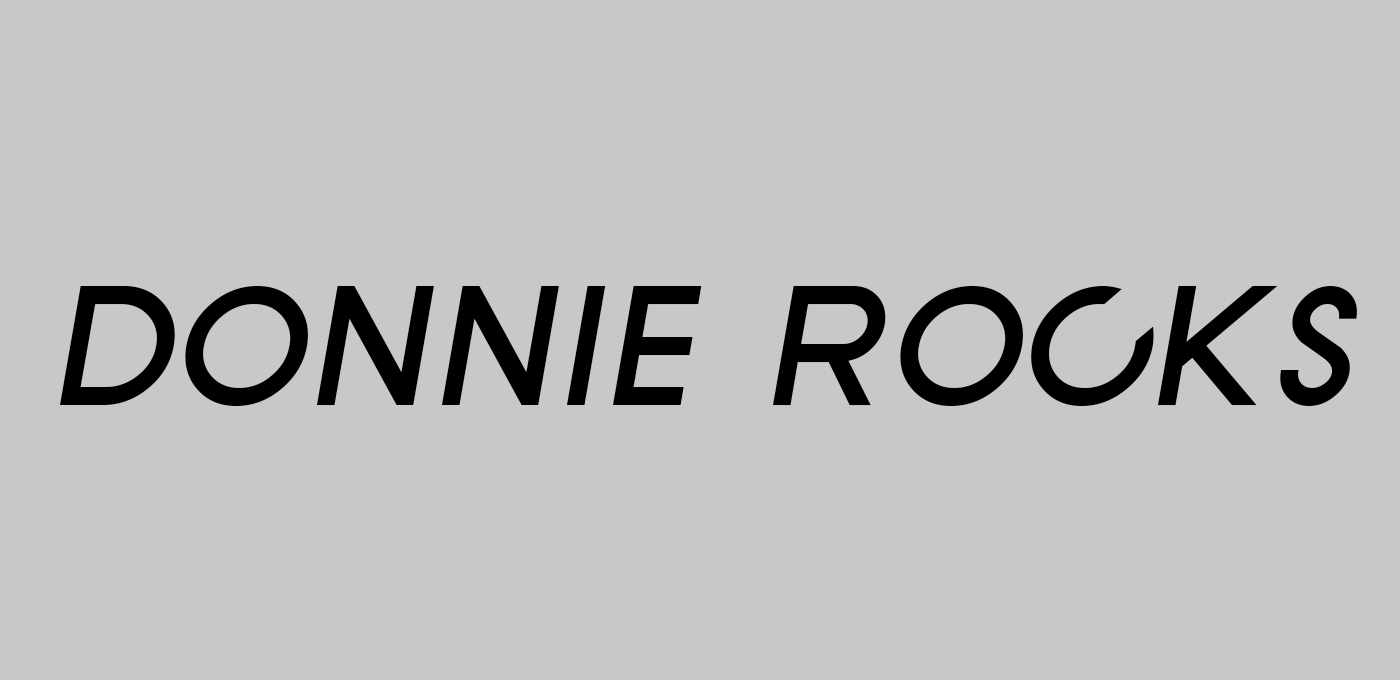
<style>
.page{position:relative;width:1400px;height:680px;background:#c9c8c8}
.page>*{position:absolute;margin:0}
.t1{font:175px "SFNewRepublicSCBoldItalic";color:#000000}
</style>
<div class="page">
<p class="t1" style="left:60px;top:286px;width:1297px;height:120px">donnie rocks</p>
</div>
